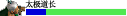
<style>
.page{position:relative;width:127px;height:16px;background:#ffffff}
.page>*{position:absolute;margin:0}
.t1{font:8px "SimSun";letter-spacing:-0.05em;color:#060906;text-transform:uppercase}
</style>
<div class="page">
<p class="t1" style="left:25px;top:0px;width:31px;height:8px">太极道长</p>
</div>
